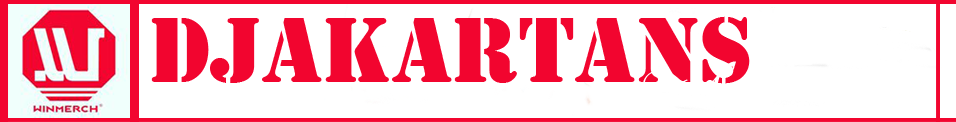
<style>
.page{position:relative;width:956px;height:122px;background:#ffffff}
.page>*{position:absolute;margin:0}
.t1{font:96px "Stencil";color:#f2052f}
</style>
<div class="page">
<p class="t1" style="left:151px;top:16px;width:599px;height:68px">DJAKARTANS</p>
</div>
